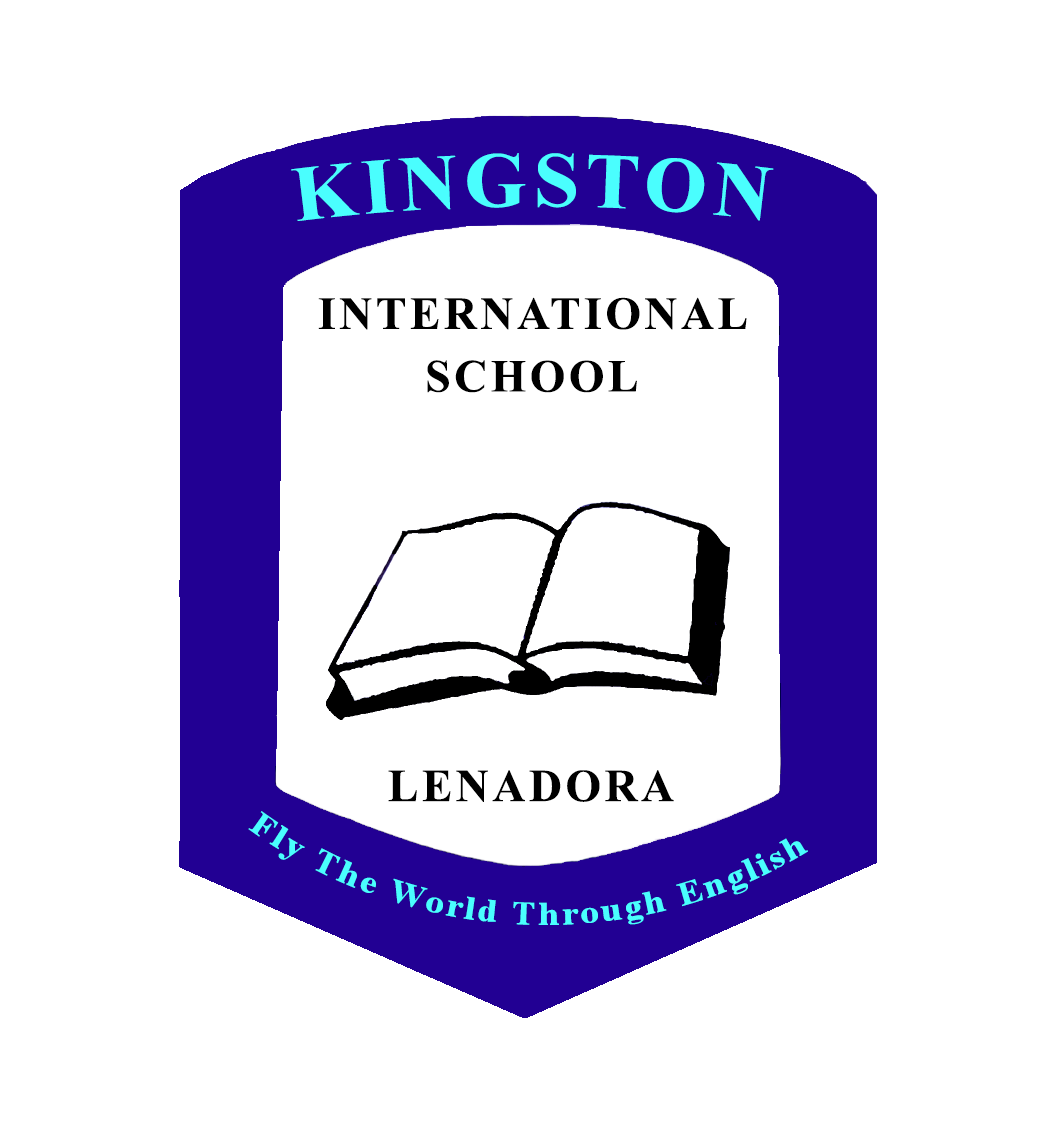
<style>
.page{position:relative;width:1056px;height:1130px;background:#ffffff}
.page>*{position:absolute;margin:0}
.t1{font:79.1px "TimesNewRomanPS-BoldMT";letter-spacing:0.075em;color:#4afefe}
.t2{font:45.8px "TimesNewRomanPS-BoldMT";letter-spacing:0.075em;color:#000000}
.t3{font:33.3px "TimesNewRomanPS-BoldMT";letter-spacing:0.075em;color:#4afefe}
</style>
<div class="page">
<p class="t1" style="left:291px;top:153px;width:483px;height:68px">KINGSTON</p>
<p class="t2" style="left:318px;top:297px;width:429px;height:33px">INTERNATIONAL</p>
<p class="t2" style="left:427px;top:360px;width:210px;height:33px">SCHOOL</p>
<p class="t2" style="left:388px;top:770px;width:286px;height:32px">LENADORA</p>
<p class="t3" style="left:248px;top:811px;width:560px;height:114px;text-align:right">Fly The World Through English</p>
</div>
